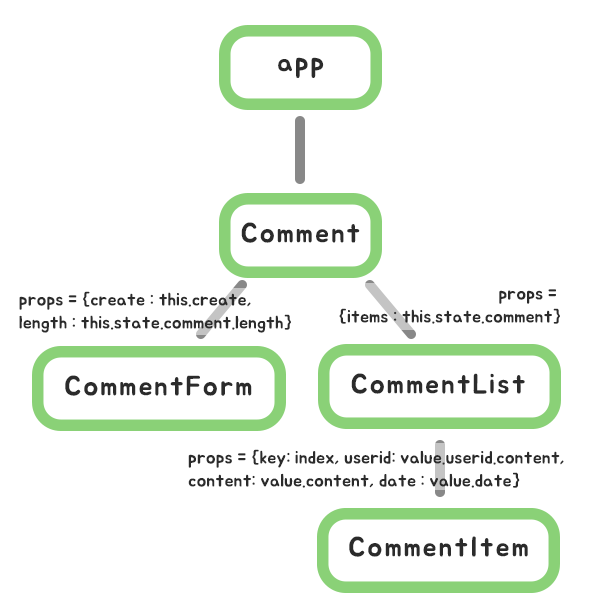
<style>
.page{position:relative;width:600px;height:600px;background:#ffffff}
.page>*{position:absolute;margin:0}
.t1{font:28px "BMJUA";letter-spacing:0.06em;color:#2b2b2b}
.t2{font:18px/23px "BMJUA";color:#2b2b2b}
</style>
<div class="page">
<p class="t1" style="left:278px;top:57px;width:46px;height:21px">app</p>
<p class="t1" style="left:241px;top:222px;width:119px;height:21px">Comment</p>
<p class="t2" style="left:19px;top:291px;width:272px;height:42px">props = {create : this.create,<br>length : this.state.comment.length}</p>
<p class="t2" style="left:339px;top:289px;width:221px;height:35px;text-align:right">props = <br>{items : this.state.comment}</p>
<p class="t1" style="left:65px;top:375px;width:187px;height:21px">CommentForm</p>
<p class="t1" style="left:351px;top:373px;width:174px;height:21px">CommentList</p>
<p class="t2" style="left:188px;top:449px;width:376px;height:39px">props = {key: index, userid: value.userid.content,<br>content: value.content, date : value.date}</p>
<p class="t1" style="left:349px;top:536px;width:179px;height:21px">CommentItem</p>
</div>
